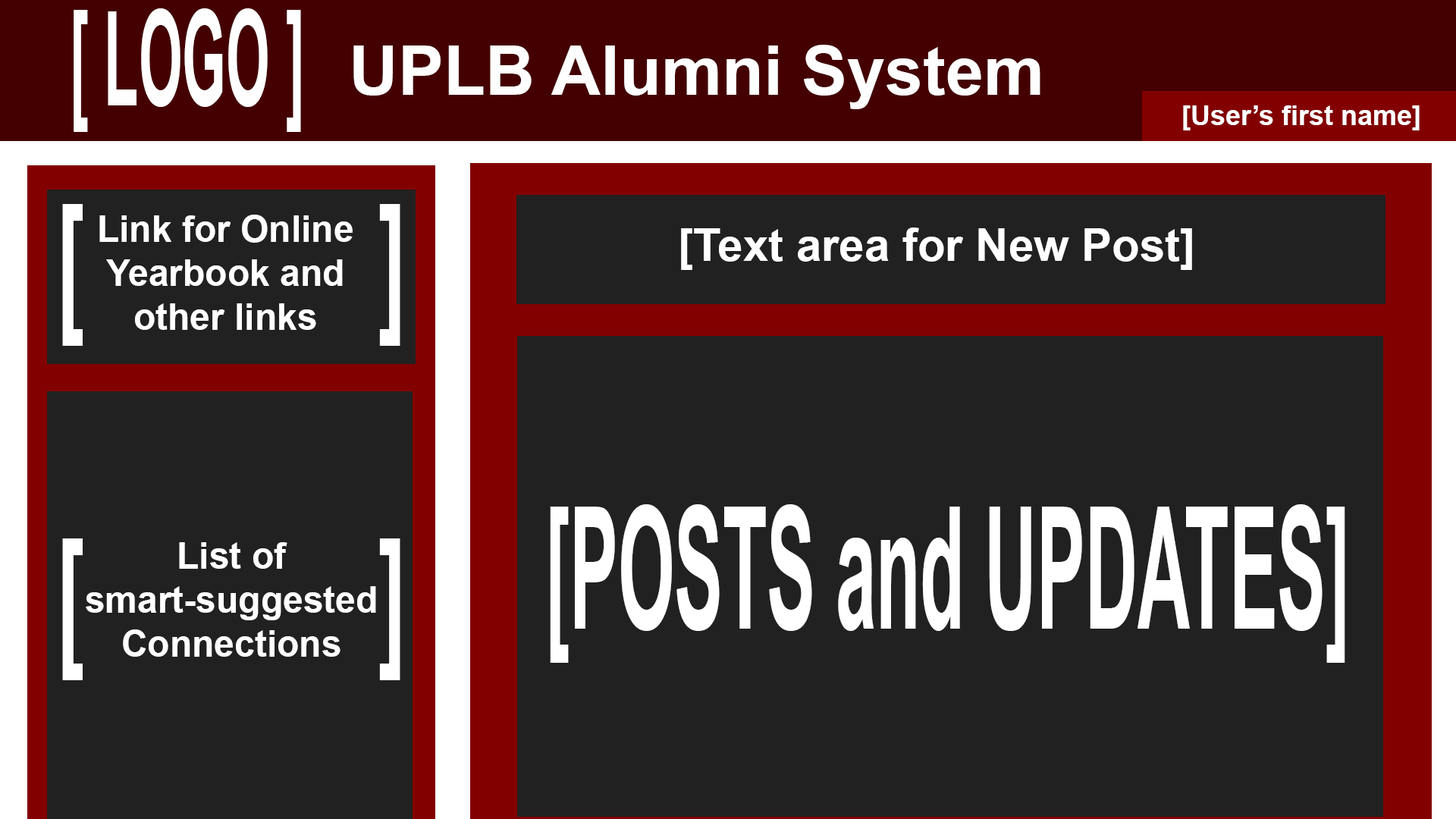
<style>
.page{position:relative;width:1456px;height:819px;background:#212121}
.page>*{position:absolute;margin:0}
.t1{font:132.9px "Arial-BoldMT";color:#fffefe;scale:0.42 1}
.t2{font:68.2px "Arial-BoldMT";color:#fffefe}
.t3{font:27.3px "Arial-BoldMT";color:#ffffff}
.t4{font:154.8px "Arial-BoldMT";color:#ffffff;scale:0.53 1}
.t5{font:36.4px "Arial-BoldMT";color:#ffffff}
.t6{font:45.5px "Arial-BoldMT";color:#ffffff}
.t7{font:170px "Arial-BoldMT";color:#ffffff;scale:0.43 1}
</style>
<div class="page">
<p class="t1" style="left:74px;top:8px;width:227px;height:124px">[ LOGO ]</p>
<p class="t2" style="left:353px;top:45px;width:687px;height:64px">UPLB Alumni System</p>
<p class="t3" style="left:1183px;top:105px;width:237px;height:25px">[User’s first name]</p>
<p class="t4" style="left:62px;top:204px;width:338px;height:142px">[             ]</p>
<p class="t5" style="left:99px;top:215px;width:254px;height:115px;text-align:center">Link for Online Yearbook and other links</p>
<p class="t6" style="left:681px;top:227px;width:511px;height:43px">[Text area for New Post]</p>
<p class="t7" style="left:550px;top:504px;width:795px;height:159px">[POSTS and UPDATES]</p>
<p class="t4" style="left:62px;top:538px;width:338px;height:142px">[             ]</p>
<p class="t5" style="left:86px;top:542px;width:290px;height:115px;text-align:center">List of<br>smart-suggested Connections</p>
</div>
